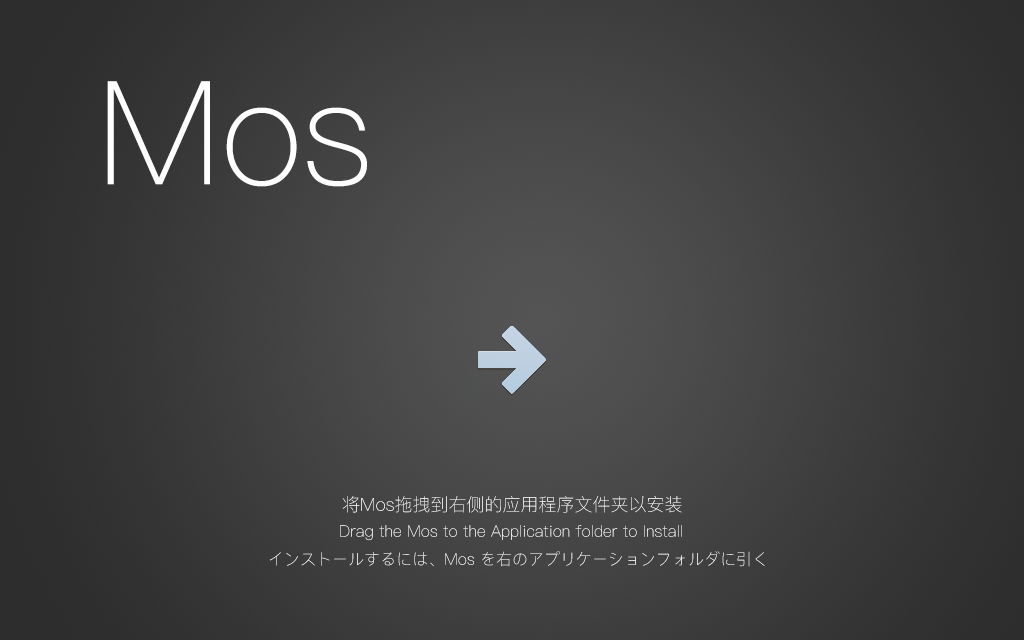
<style>
.page{position:relative;width:1024px;height:640px}
.page>*{position:absolute;margin:0}
.t1{font:144px "PingFangSC-Thin";color:#ffffff}
.t2{font:18px "PingFangSC-Thin";color:#ffffff}
.t3{font:16px "PingFangSC-Thin";color:#ffffff}
</style>
<div class="page">
<p class="t1" style="left:107px;top:81px;width:260px;height:106px">Mos</p>
<p class="t2" style="left:342px;top:496px;width:340px;height:17px">将Mos拖拽到右侧的应用程序文件夹以安装</p>
<p class="t3" style="left:340px;top:525px;width:342px;height:16px">Drag the Mos to the Application folder to Install</p>
<p class="t3" style="left:269px;top:551px;width:496px;height:16px">インストールするには、Mos を右のアプリケーションフォルダに引く</p>
</div>
